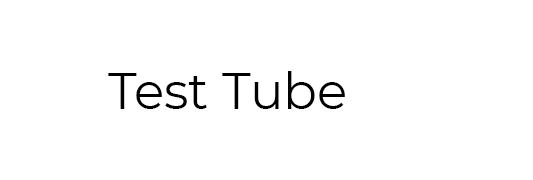
<style>
.page{position:relative;width:533px;height:180px;background:#ffffff}
.page>*{position:absolute;margin:0}
.t1{font:50px "Montserrat-Regular";color:#000000}
</style>
<div class="page">
<p class="t1" style="left:108px;top:71px;width:237px;height:38px">Test Tube</p>
</div>
